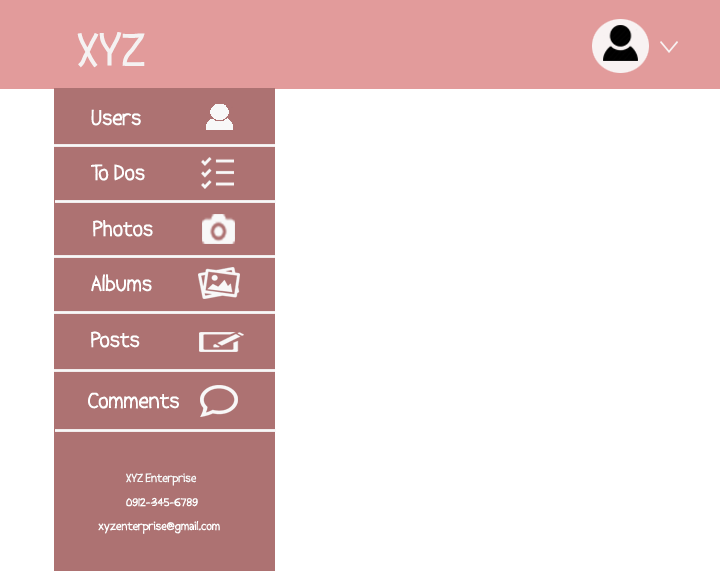
<style>
.page{position:relative;width:720px;height:571px;background:#ffffff}
.page>*{position:absolute;margin:0}
.t1{font:48px "Abscissa";color:#f5f2f2}
.t2{font:22px "Abscissa";color:#ffffff}
.t3{font:12px "Abscissa";color:#f8f8f8}
.t4{font:12px "Abscissa";color:#ffffff}
</style>
<div class="page">
<p class="t1" style="left:77px;top:32px;width:68px;height:36px">XYZ</p>
<p class="t2" style="left:91px;top:109px;width:50px;height:17px">Users</p>
<p class="t2" style="left:91px;top:164px;width:54px;height:17px">To Dos</p>
<p class="t2" style="left:93px;top:220px;width:60px;height:17px">Photos</p>
<p class="t2" style="left:91px;top:274px;width:61px;height:18px">Albums</p>
<p class="t2" style="left:91px;top:331px;width:49px;height:17px">Posts</p>
<p class="t2" style="left:88px;top:392px;width:91px;height:17px">Comments</p>
<p class="t3" style="left:126px;top:473px;width:71px;height:13px">XYZ Enterprise</p>
<p class="t4" style="left:126px;top:497px;width:72px;height:10px">0912--345-6789</p>
<p class="t4" style="left:98px;top:521px;width:122px;height:13px">xyzenterprise@gmail.com</p>
</div>
